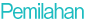
<style>
.page{position:relative;width:85px;height:22px;background:#ffffff}
.page>*{position:absolute;margin:0}
.t1{font:20px "GothicMB101Pro-Regular";letter-spacing:-0.06em;color:#1dbcc0;scale:0.9 1}
</style>
<div class="page">
<p class="t1" style="left:1px;top:3px;width:83px;height:16px">Pemilahan</p>
</div>
